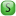
<style>
.page{position:relative;width:16px;height:16px}
.page>*{position:absolute;margin:0}
.t1{font:12px "MyriadPro-Regular"}
</style>
<div class="page">
<p class="t1" style="left:5px;top:3px;width:6px;height:9px">S</p>
</div>
